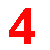
<style>
.page{position:relative;width:50px;height:50px;background:#ffffff}
.page>*{position:absolute;margin:0}
.t1{font:50px "Arial-BoldMT";color:#fd0606}
</style>
<div class="page">
<p class="t1" style="left:9px;top:8px;width:26px;height:36px">4</p>
</div>
